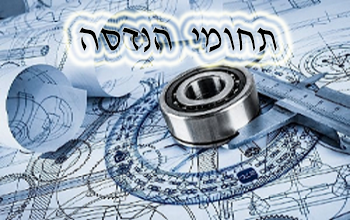
<style>
.page{position:relative;width:350px;height:220px}
.page>*{position:absolute;margin:0}
.t1{font:36px "GuttmanAdii-Light";color:#000000}
</style>
<div class="page">
<p class="t1" style="left:79px;top:27px;width:198px;height:26px">תחומי הנדסה</p>
</div>
